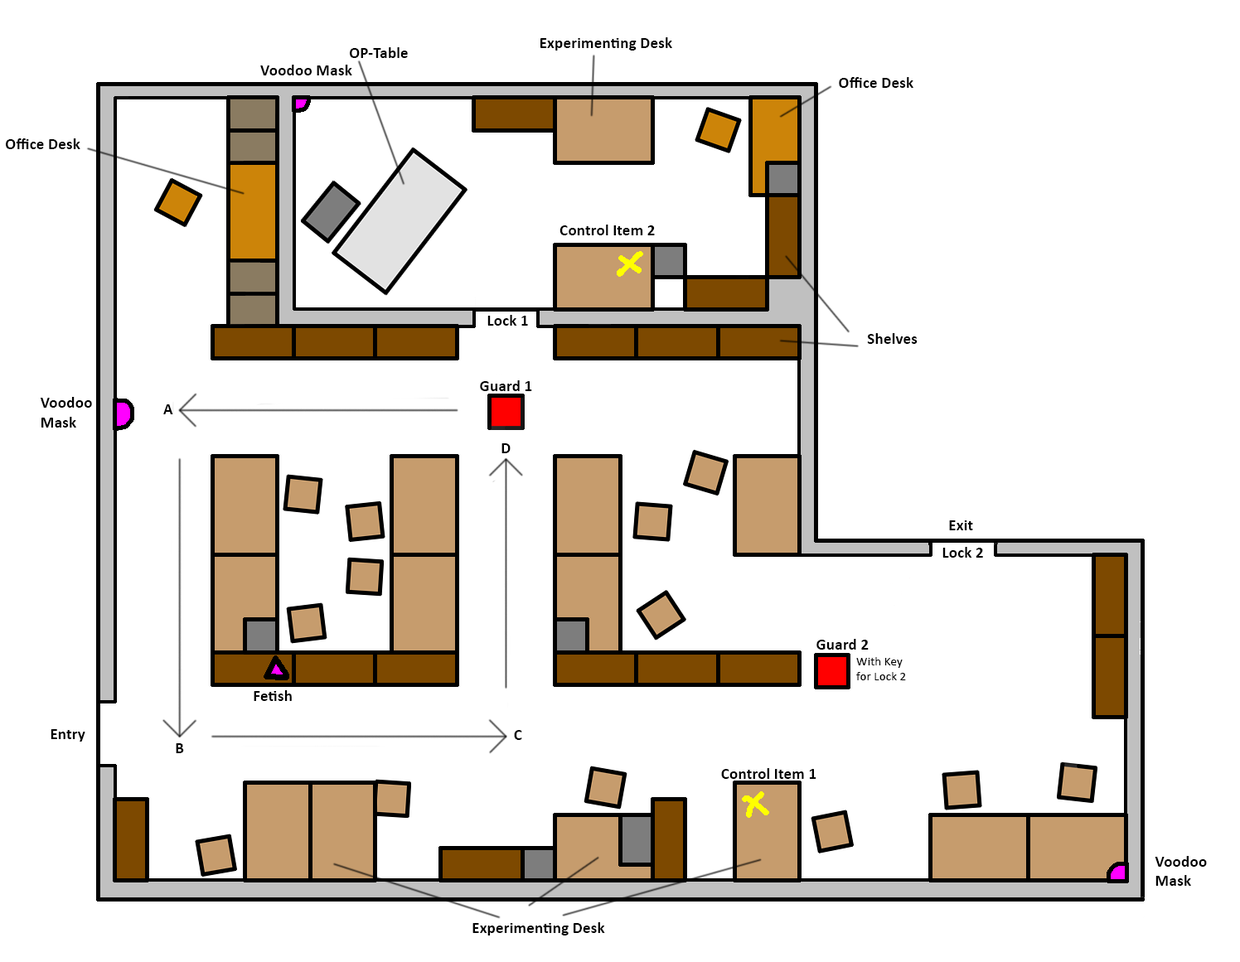
<style>
.page{position:relative;width:1240px;height:962px;background:#ffffff}
.page>*{position:absolute;margin:0}
.t1{font:16.1px "Calibri-Bold";color:#000000}
.t2{font:12.7px "Calibri";color:#000000}
</style>
<div class="page">
<p class="t1" style="left:540px;top:37px;width:132px;height:14px">Experimenting Desk</p>
<p class="t1" style="left:350px;top:47px;width:58px;height:11px">OP-Table</p>
<p class="t1" style="left:260px;top:65px;width:92px;height:10px">Voodoo Mask</p>
<p class="t1" style="left:839px;top:77px;width:74px;height:11px">Office Desk</p>
<p class="t1" style="left:6px;top:138px;width:74px;height:11px">Office Desk</p>
<p class="t1" style="left:559px;top:225px;width:96px;height:10px">Control Item 2</p>
<p class="t1" style="left:487px;top:315px;width:41px;height:11px">Lock 1</p>
<p class="t1" style="left:867px;top:333px;width:50px;height:11px">Shelves</p>
<p class="t1" style="left:480px;top:380px;width:52px;height:11px">Guard 1</p>
<p class="t1" style="left:41px;top:397px;width:51px;height:31px">Voodoo<br>Mask</p>
<p class="t1" style="left:163px;top:404px;width:10px;height:10px">A</p>
<p class="t1" style="left:501px;top:443px;width:9px;height:10px">D</p>
<p class="t1" style="left:949px;top:520px;width:24px;height:10px">Exit</p>
<p class="t1" style="left:942px;top:547px;width:41px;height:11px">Lock 2</p>
<p class="t1" style="left:816px;top:639px;width:52px;height:11px">Guard 2</p>
<p class="t2" style="left:856px;top:657px;width:50px;height:23px">With Key<br>for Lock 2</p>
<p class="t1" style="left:254px;top:690px;width:38px;height:11px">Fetish</p>
<p class="t1" style="left:51px;top:729px;width:34px;height:13px">Entry</p>
<p class="t1" style="left:514px;top:730px;width:8px;height:10px">C</p>
<p class="t1" style="left:176px;top:743px;width:8px;height:10px">B</p>
<p class="t1" style="left:721px;top:768px;width:95px;height:11px">Control Item 1</p>
<p class="t1" style="left:1154px;top:856px;width:52px;height:30px">Voodoo<br>Mask</p>
<p class="t1" style="left:472px;top:922px;width:133px;height:13px">Experimenting Desk</p>
</div>
